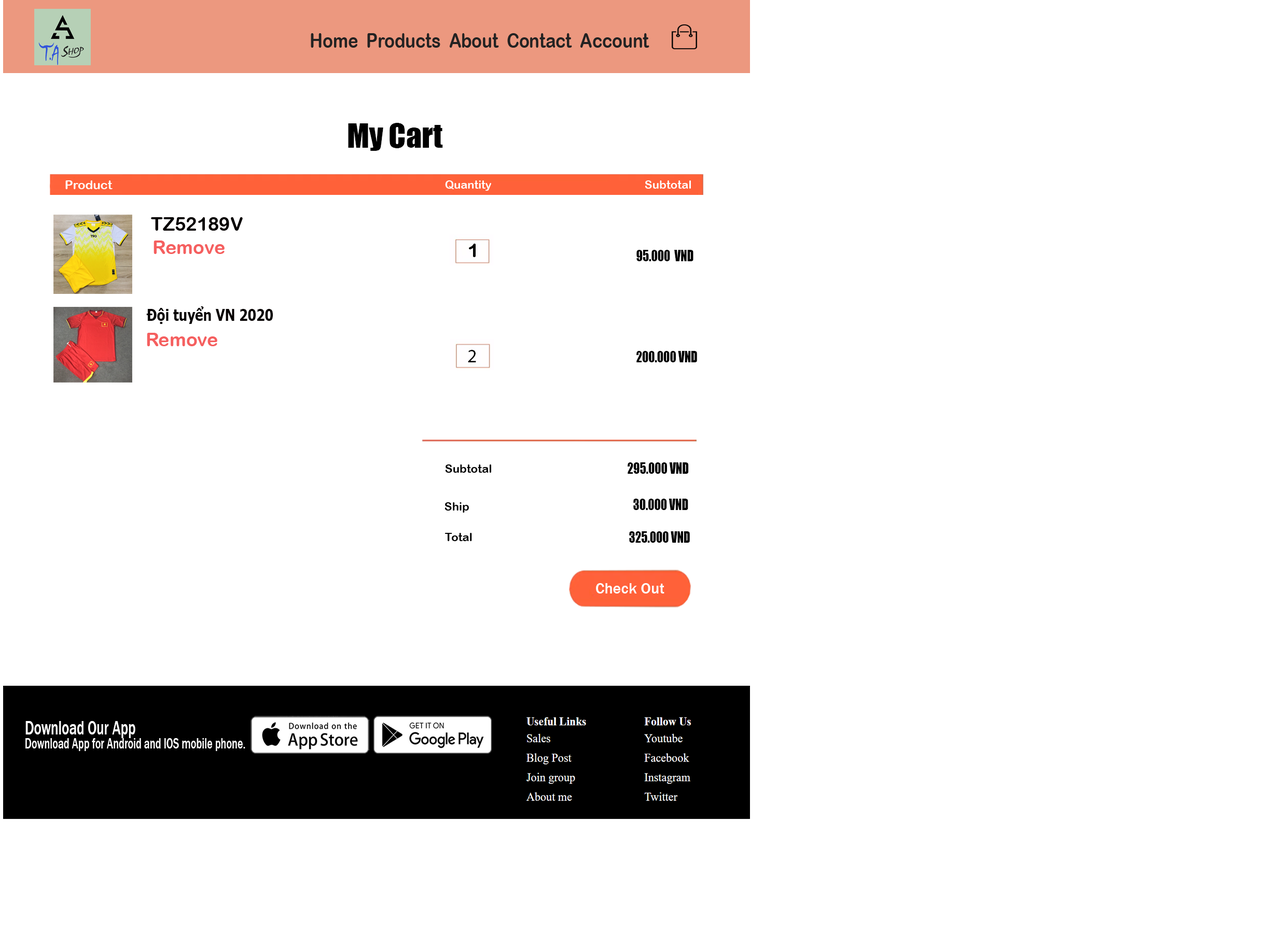
<style>
.page{position:relative;width:1278px;height:933px;background:#ffffff}
.page>*{position:absolute;margin:0}
.t1{font:20.3px "ArialRoundedMTBold";color:#232222;scale:0.83 1}
.t2{font:31.1px "Impact";color:#000000}
.t3{font:12.3px "ArialRoundedMTBold";color:#fefefe}
.t4{font:11.3px "ArialRoundedMTBold";color:#fefefe}
.t5{font:11.5px "ArialRoundedMTBold";color:#fefefe}
.t6{font:18.7px "ArialRoundedMTBold";color:#060101}
.t7{font:18.7px "ArialRoundedMTBold";color:#f55f5f}
.t8{font:18.7px "ArialRoundedMTBold";color:#000000}
.t9{font:14.4px "Impact";color:#000000;scale:0.82 1}
.t10{font:16px "Tahoma-Bold";color:#060101;scale:0.84 1}
.t11{font:18.7px "MyriadPro-Regular";color:#000000}
.t12{font:11.5px "ArialRoundedMTBold";color:#000000}
.t13{font:15.7px "FranklinGothic-Medium";color:#fefefe}
.t14{font:15px "FranklinGothic-Medium";color:#ffffff;scale:0.69 1}
.t15{font:20px "FranklinGothic-Medium";color:#ffffff;scale:0.69 1}
</style>
<div class="page">
<p class="t1" style="left:311px;top:33px;width:338px;height:15px">Home  Products  About  Contact  Account</p>
<p class="t2" style="left:348px;top:123px;width:95px;height:28px">My Cart</p>
<p class="t3" style="left:65px;top:180px;width:48px;height:9px">Product</p>
<p class="t4" style="left:445px;top:180px;width:46px;height:11px">Quantity</p>
<p class="t5" style="left:645px;top:180px;width:46px;height:9px">Subtotal</p>
<p class="t6" style="left:151px;top:217px;width:92px;height:14px">TZ52189V</p>
<p class="t7" style="left:153px;top:241px;width:72px;height:13px">Remove</p>
<p class="t8" style="left:469px;top:244px;width:6px;height:13px">1</p>
<p class="t8" style="left:469px;top:244px;width:6px;height:13px">1</p>
<p class="t9" style="left:636px;top:250px;width:57px;height:11px">95.000  VND</p>
<p class="t10" style="left:146px;top:306px;width:127px;height:18px">Đội tuyển VN 2020</p>
<p class="t7" style="left:147px;top:333px;width:70px;height:13px">Remove</p>
<p class="t11" style="left:468px;top:350px;width:8px;height:12px">2</p>
<p class="t9" style="left:636px;top:351px;width:61px;height:11px">200.000 VND</p>
<p class="t12" style="left:445px;top:465px;width:46px;height:8px">Subtotal</p>
<p class="t9" style="left:627px;top:463px;width:62px;height:11px">295.000 VND</p>
<p class="t12" style="left:444px;top:502px;width:25px;height:11px">Ship</p>
<p class="t9" style="left:633px;top:499px;width:55px;height:11px">30.000 VND</p>
<p class="t12" style="left:444px;top:533px;width:28px;height:8px">Total</p>
<p class="t9" style="left:629px;top:531px;width:61px;height:12px">325.000 VND</p>
<p class="t13" style="left:596px;top:583px;width:68px;height:11px">Check Out</p>
<p class="t14" style="left:25px;top:721px;width:220px;height:30px"><span class="t15">Download Our App<br></span>Download App for Android and IOS mobile phone.</p>
</div>
